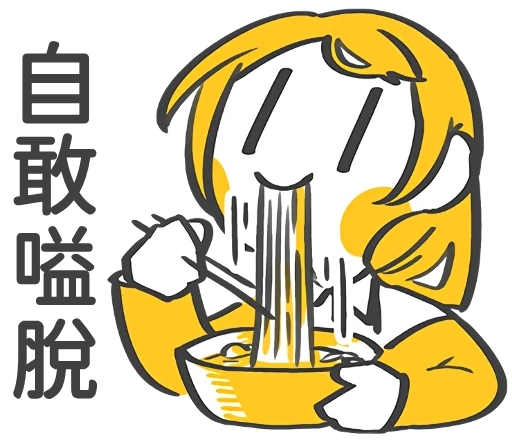
<style>
.page{position:relative;width:512px;height:443px;background:#ffffff}
.page>*{position:absolute;margin:0}
.t1{font:88px/92px "TaiwanPearl-SemiBold"}
</style>
<div class="page">
<p class="t1" style="left:4px;top:32px;width:103px;height:377px">自<br>敢<br>嗌<br>脫</p>
</div>
